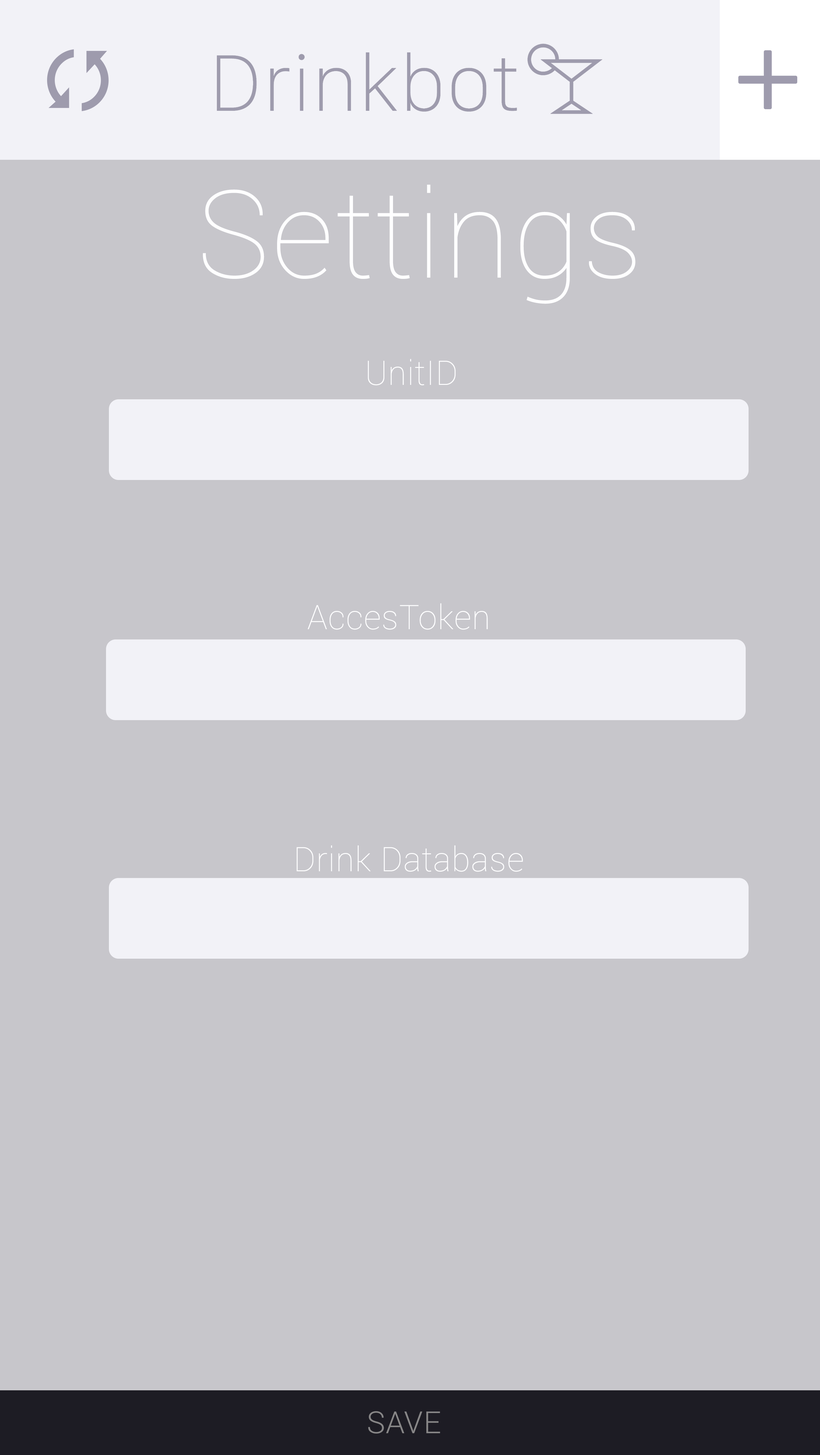
<style>
.page{position:relative;width:820px;height:1455px;background:#c7c6cb}
.page>*{position:absolute;margin:0}
.t1{font:122px "Roboto-Thin";letter-spacing:0.02em;color:#fefeff}
.t2{font:33.9px "Roboto-Thin";letter-spacing:0.02em;color:#fefeff}
.t3{font:30.5px "Roboto-Light";letter-spacing:0.02em;color:#878687}
</style>
<div class="page">
<p class="t1" style="left:203px;top:184px;width:432px;height:120px">Settings</p>
<p class="t2" style="left:368px;top:359px;width:88px;height:26px">UnitID</p>
<p class="t2" style="left:307px;top:603px;width:181px;height:27px">AccesToken</p>
<p class="t2" style="left:296px;top:845px;width:227px;height:27px">Drink Database</p>
<p class="t3" style="left:368px;top:1411px;width:72px;height:22px">SAVE</p>
</div>
